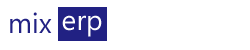
<style>
.page{position:relative;width:250px;height:50px;background:#ffffff}
.page>*{position:absolute;margin:0}
.t1{font:28px "SegoeUI";color:#212183}
.t2{font:28px "SegoeUI";color:#fffffe}
</style>
<div class="page">
<p class="t1" style="left:10px;top:12px;width:42px;height:21px">mix</p>
<p class="t2" style="left:62px;top:15px;width:40px;height:22px">erp</p>
</div>
